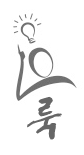
<style>
.page{position:relative;width:84px;height:155px;background:#ffffff}
.page>*{position:absolute;margin:0}
.t1{font:48px "JSYB-KSCpc-EUC-H";letter-spacing:-0.05em;color:#666666;scale:0.95 1}
</style>
<div class="page">
<p class="t1" style="left:27px;top:96px;width:35px;height:44px">룩</p>
</div>
